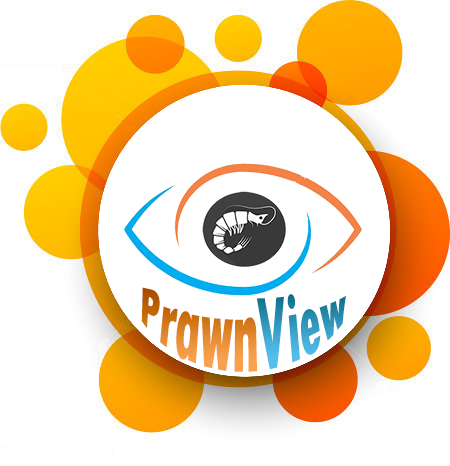
<style>
.page{position:relative;width:450px;height:466px;background:#ffffff}
.page>*{position:absolute;margin:0}
.t1{font:48px "TwCenMT-CondensedExtraBold"}
</style>
<div class="page">
<p class="t1" style="left:141px;top:287px;width:205px;height:85px;text-align:center">PrawnView</p>
</div>
